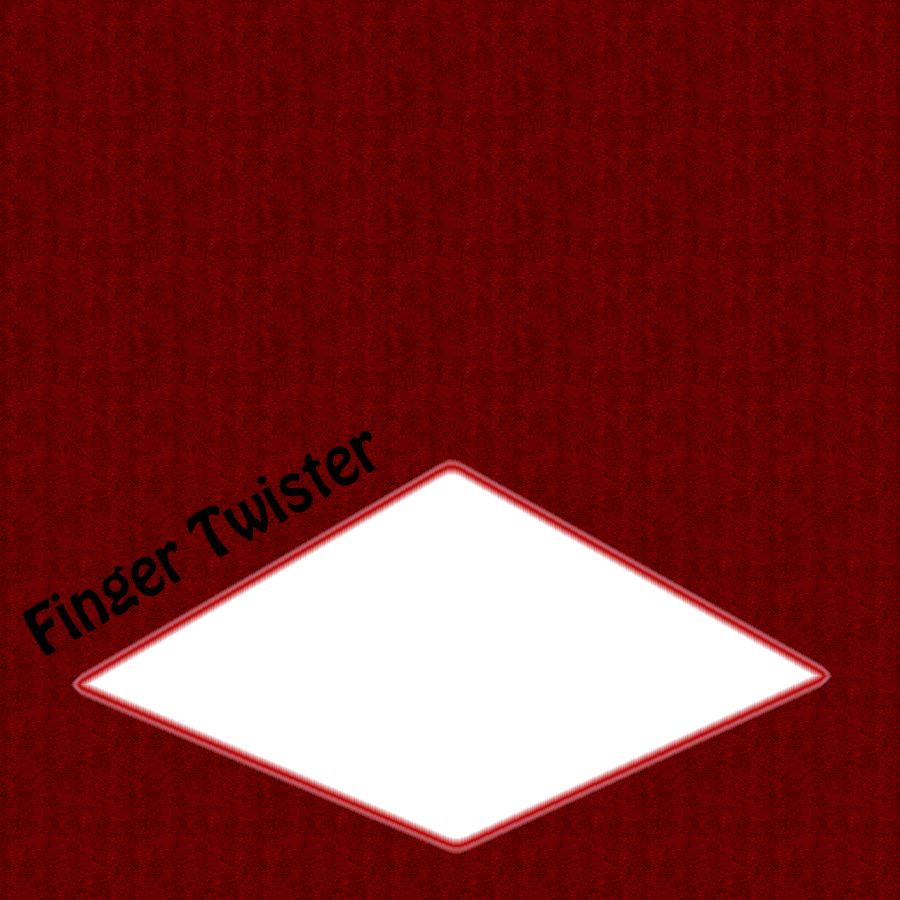
<style>
.page{position:relative;width:900px;height:900px}
.page>*{position:absolute;margin:0}
.t1{font:60px "HoboStd";color:#000000}
</style>
<div class="page">
<p class="t1" style="left:23px;top:430px;width:353px;height:226px;rotate:-30deg">Finger Twister</p>
</div>
